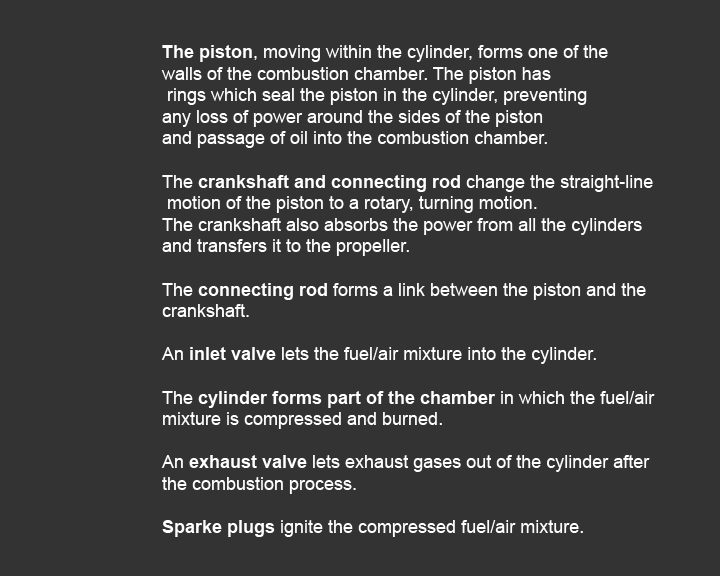
<style>
.page{position:relative;width:720px;height:576px;background:#333333}
.page>*{position:absolute;margin:0}
.t1{font:18px "ArialMT";color:#ffffff}
.t2{font:18px "Arial-BoldMT";color:#ffffff}
</style>
<div class="page">
<p class="t1" style="left:161px;top:45px;width:494px;height:492px"><span class="t2">The piston</span>, moving within the cylinder, forms one of the <br>walls of the combustion chamber. The piston has<br> rings which seal the piston in the cylinder, preventing <br>any loss of power around the sides of the piston <br>and passage of oil into the combustion chamber.<br><br>The <span class="t2">crankshaft and connecting rod</span> change the straight-line<br> motion of the piston to a rotary, turning motion.<br>The crankshaft also absorbs the power from all the cylinders <br>and transfers it to the propeller.<br><br>The <span class="t2">connecting rod</span> forms a link between the piston and the <br>crankshaft. <br><br>An <span class="t2">inlet valve</span> lets the fuel/air mixture into the cylinder. <br><br>The <span class="t2">cylinder forms part of the chamber</span> in which the fuel/air <br>mixture is compressed and burned.<br><br>An <span class="t2">exhaust valve</span> lets exhaust gases out of the cylinder after <br>the combustion process.<br><br><span class="t2">Sparke plugs</span> ignite the compressed fuel/air mixture.</p>
</div>
